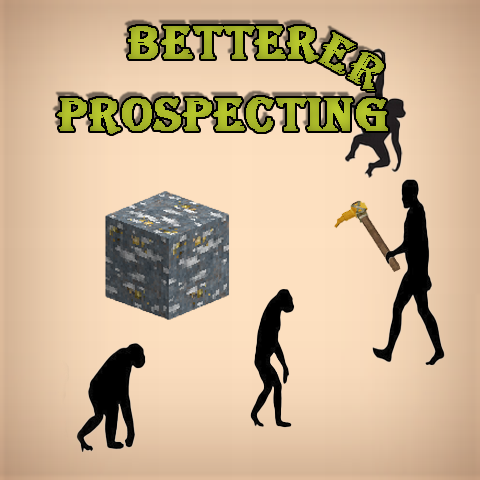
<style>
.page{position:relative;width:480px;height:480px}
.page>*{position:absolute;margin:0}
.t1{font:48px/72px "Algerian";letter-spacing:0.025em;color:#a5b328;font-weight:bold}
.t2{font:48px "Algerian";letter-spacing:0.025em;color:#a2b128;font-weight:bold;scale:1.05 1}
</style>
<div class="page">
<p class="t1" style="left:57px;top:26px;width:331px;height:108px;text-align:center">Better  Prospecting</p>
<p class="t2" style="left:317px;top:32px;width:67px;height:59px;rotate:30deg">ER</p>
</div>
